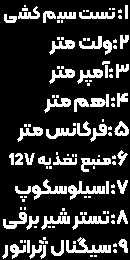
<style>
.page{position:relative;width:130px;height:260px;background:#000000}
.page>*{position:absolute;margin:0}
.t1{font:19.8px/29.2px "Kalameh-ExtraBold";letter-spacing:-0.01em;color:#ffffff;scale:1.04 1}
.t2{font:17.4px/29.2px "Kalameh-ExtraBold";letter-spacing:-0.01em;color:#ffffff;scale:1.04 1}
.t3{font:16.5px/29.2px "Kalameh-ExtraBold";letter-spacing:-0.01em;color:#ffffff;scale:1.04 1}
</style>
<div class="page">
<p class="t1" style="left:2px;top:5px;width:127px;height:254px">1: <span class="t2">تست سیم کشی<br></span>2:ولت متر<br>3:آمپر متر<br>4:اهم متر<br>5:فرکانس متر<br>6:<span class="t3">منبع تغذیه 12V<br></span>7:اسیلوسکوپ<br>8:تستر شیر برقی<br>9:سیگنال ژنراتور</p>
</div>
